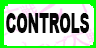
<style>
.page{position:relative;width:96px;height:48px;background:#ffffff}
.page>*{position:absolute;margin:0}
.t1{font:28.1px "Arial-Black";color:#050505;scale:0.49 1}
</style>
<div class="page">
<p class="t1" style="left:6px;top:13px;width:83px;height:20px">CONTROLS</p>
</div>
